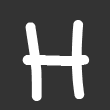
<style>
.page{position:relative;width:110px;height:110px;background:#333333}
.page>*{position:absolute;margin:0}
.t1{font:98px "Bromine";color:#ffffff}
</style>
<div class="page">
<p class="t1" style="left:22px;top:20px;width:68px;height:81px">H</p>
</div>
